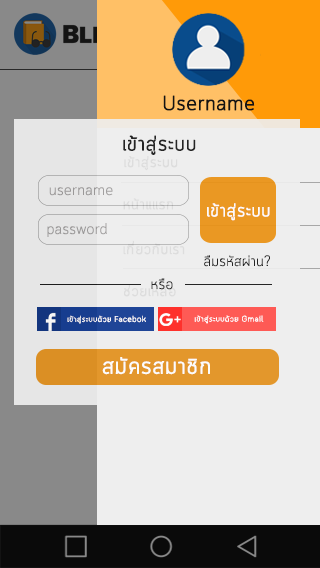
<style>
.page{position:relative;width:320px;height:568px;background:#eeeeee}
.page>*{position:absolute;margin:0}
.t1{font:20px "Cloud-Light";color:#141414;font-weight:bold}
.t2{font:20.5px "Cloud-Light";color:#141414;font-weight:bold}
.t3{font:15px "Cloud-Light";color:#dddddd;font-weight:bold}
.t4{font:15px "Cloud-Light";color:#9b9999}
.t5{font:18px "Cloud-Light";color:#fefcfc;font-weight:bold}
.t6{font:15px "Cloud-Light";color:#141414}
.t7{font:15px "Cloud-Light";color:#252525}
.t8{font:23px "Cloud-Light";color:#fdfdfc;font-weight:bold}
</style>
<div class="page">
<p class="t1" style="left:163px;top:95px;width:92px;height:16px">Username</p>
<p class="t2" style="left:123px;top:135px;width:73px;height:20px">เข้าสู่ระบบ</p>
<p class="t3" style="left:124px;top:156px;width:54px;height:15px">เข้าสู่ระบบ</p>
<p class="t4" style="left:49px;top:187px;width:64px;height:9px">username</p>
<p class="t3" style="left:123px;top:198px;width:50px;height:12px">หน้าแแรก</p>
<p class="t5" style="left:207px;top:203px;width:63px;height:18px">เข้าสู่ระบบ</p>
<p class="t4" style="left:47px;top:223px;width:60px;height:14px">password</p>
<p class="t3" style="left:123px;top:240px;width:62px;height:15px">เกี่ยวกับเรา</p>
<p class="t6" style="left:204px;top:255px;width:66px;height:12px">ลืมรหัสผ่าน?</p>
<p class="t7" style="left:151px;top:278px;width:22px;height:12px">หรือ</p>
<p class="t8" style="left:102px;top:357px;width:108px;height:18px">สมัครสมาชิก</p>
</div>
